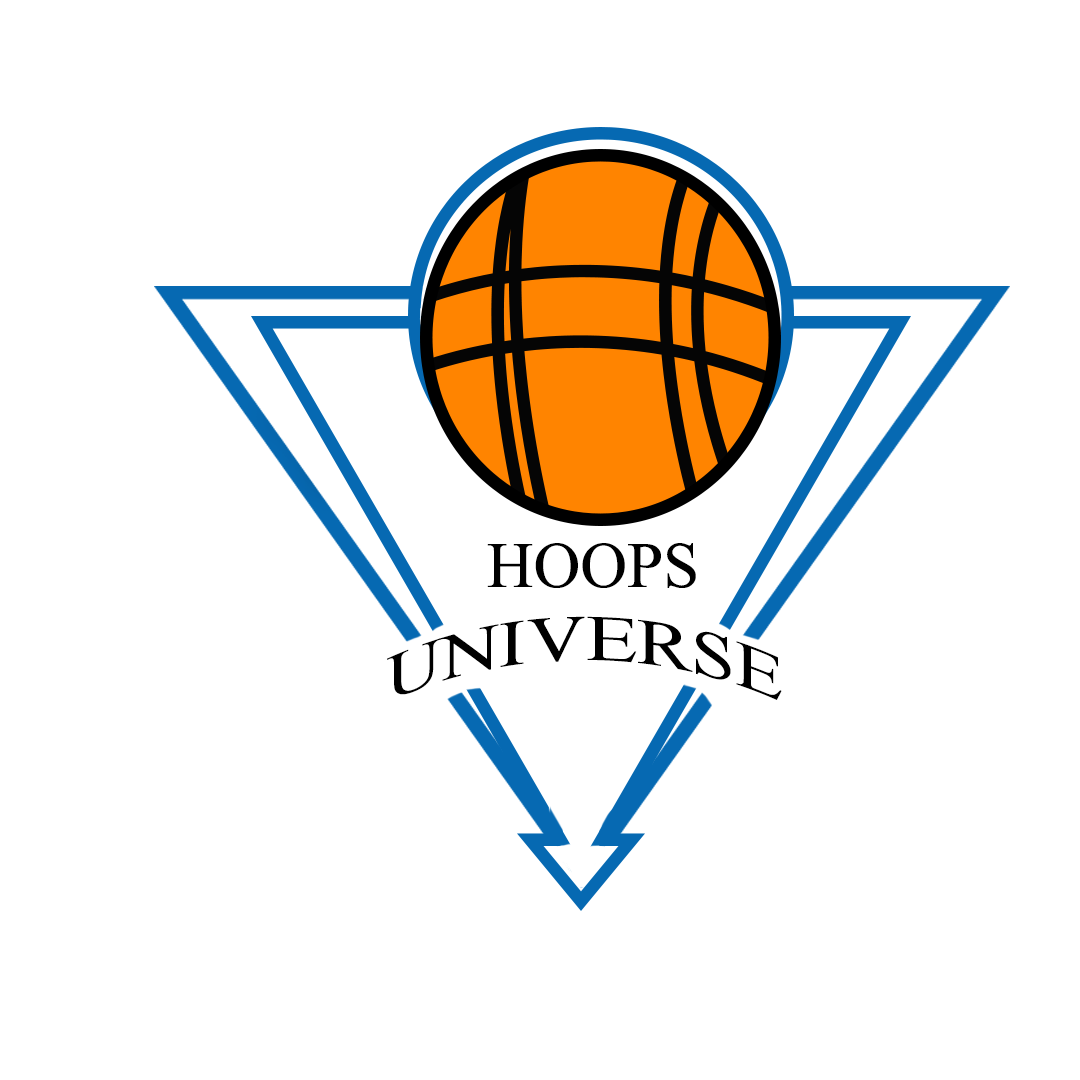
<style>
.page{position:relative;width:1080px;height:1080px;background:#ffffff}
.page>*{position:absolute;margin:0}
.t1{font:64.8px "TimesNewRomanPSMT";color:#000000}
.t2{font:64.6px "TimesNewRomanPSMT";color:#000000;scale:1.24 1}
</style>
<div class="page">
<p class="t1" style="left:487px;top:543px;width:209px;height:45px">HOOPS</p>
<p class="t2" style="left:387px;top:616px;width:395px;height:84px">UNIVERSE</p>
</div>
